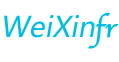
<style>
.page{position:relative;width:119px;height:62px;background:#ffffff}
.page>*{position:absolute;margin:0}
.t1{font:28px "MicrosoftYaHei";color:#00bde5;font-style:italic}
.t2{font:28px "Apple-Chancery";color:#00bde5;font-weight:bold}
</style>
<div class="page">
<p class="t1" style="left:4px;top:13px;width:114px;height:36px">WeiXin<span class="t2">fr</span></p>
</div>
